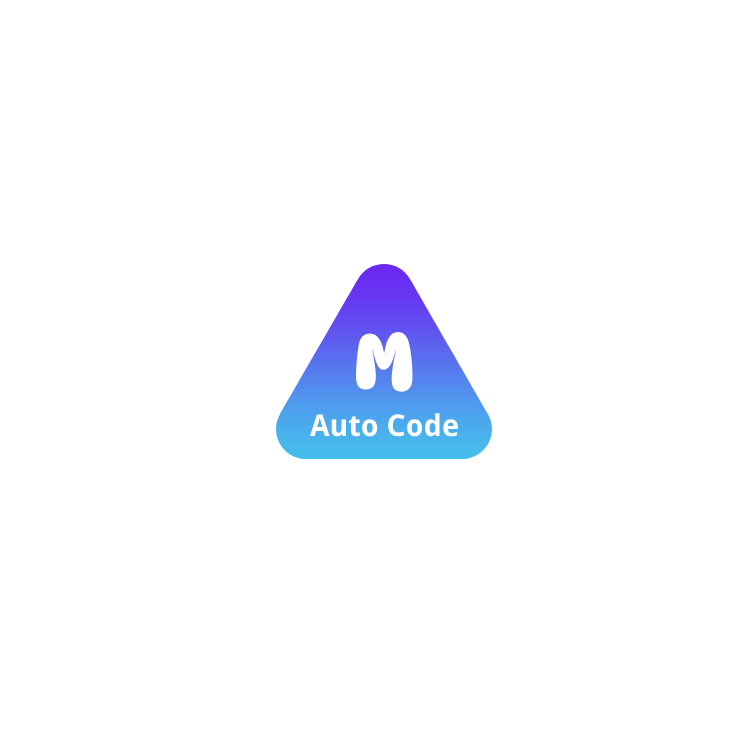
<style>
.page{position:relative;width:750px;height:750px;background:#ffffff}
.page>*{position:absolute;margin:0}
.t1{font:80px "DynaPuff-Bold";color:#ffffff}
.t2{font:30px "DroidSans-Bold";color:#ffffff}
</style>
<div class="page">
<p class="t1" style="left:356px;top:331px;width:57px;height:61px">M</p>
<p class="t2" style="left:310px;top:413px;width:148px;height:24px">Auto Code</p>
</div>
